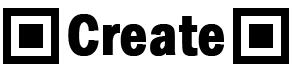
<style>
.page{position:relative;width:294px;height:67px;background:#ffffff}
.page>*{position:absolute;margin:0}
.t1{font:58.7px "FranklinGothic-DemiCond";color:#000000;font-weight:bold}
</style>
<div class="page">
<p class="t1" style="left:68px;top:14px;width:156px;height:42px">Create</p>
</div>
